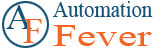
<style>
.page{position:relative;width:153px;height:49px;background:#ffffff}
.page>*{position:absolute;margin:0}
.t1{font:36px "TimesNewRomanPSMT";color:#165372}
.t2{font:22.4px "TimesNewRomanPSMT";color:#165372;scale:0.93 1}
.t3{font:36px "TimesNewRomanPSMT";color:#f26525}
.t4{font:32.1px "TimesNewRomanPSMT";color:#f26525;scale:1.35 1}
</style>
<div class="page">
<p class="t1" style="left:6px;top:5px;width:26px;height:24px">A</p>
<p class="t2" style="left:53px;top:1px;width:100px;height:16px">Automation</p>
<p class="t2" style="left:53px;top:1px;width:100px;height:16px">Automation</p>
<p class="t3" style="left:23px;top:19px;width:19px;height:24px">F</p>
<p class="t4" style="left:53px;top:25px;width:99px;height:21px">Fever</p>
</div>
